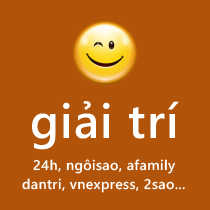
<style>
.page{position:relative;width:210px;height:210px;background:#b15409}
.page>*{position:absolute;margin:0}
.t1{font:48px "SegoeWP-Semibold";letter-spacing:0.025em;color:#ffffff}
.t2{font:14px "SegoeWP-Semibold";letter-spacing:0.025em;color:#fefefe}
.t3{font:14px "SegoeWP-Semibold";letter-spacing:0.025em;color:#ffffff}
</style>
<div class="page">
<p class="t1" style="left:32px;top:101px;width:147px;height:49px">giải trí</p>
<p class="t2" style="left:33px;top:159px;width:142px;height:15px">24h, ngôisao, afamily</p>
<p class="t3" style="left:22px;top:178px;width:163px;height:15px">dantri, vnexpress, 2sao...</p>
</div>
